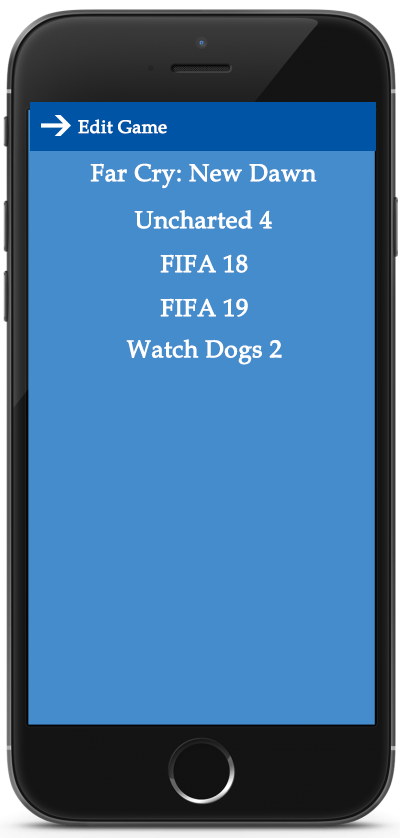
<style>
.page{position:relative;width:400px;height:838px;background:#448ccb}
.page>*{position:absolute;margin:0}
.t1{font:18px "BookAntiqua";color:#ffffff;font-weight:bold}
.t2{font:24px "BookAntiqua";color:#ffffff;font-weight:bold}
</style>
<div class="page">
<p class="t1" style="left:78px;top:119px;width:89px;height:15px">Edit Game</p>
<p class="t2" style="left:90px;top:163px;width:227px;height:26px">Far Cry: New Dawn</p>
<p class="t2" style="left:134px;top:210px;width:138px;height:19px">Uncharted 4</p>
<p class="t2" style="left:160px;top:254px;width:88px;height:19px">FIFA 18</p>
<p class="t2" style="left:160px;top:298px;width:88px;height:19px">FIFA 19</p>
<p class="t2" style="left:126px;top:339px;width:156px;height:26px">Watch Dogs 2</p>
</div>
